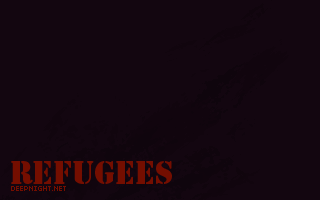
<style>
.page{position:relative;width:320px;height:200px;background:#130610}
.page>*{position:absolute;margin:0}
.t1{font:30px "StencilStd";color:#740e00}
.t2{font:8px "04b03";color:#740e00}
</style>
<div class="page">
<p class="t1" style="left:11px;top:161px;width:161px;height:23px">Refugees</p>
<p class="t2" style="left:11px;top:186px;width:55px;height:5px">DEEPNIGHT.NET</p>
</div>
